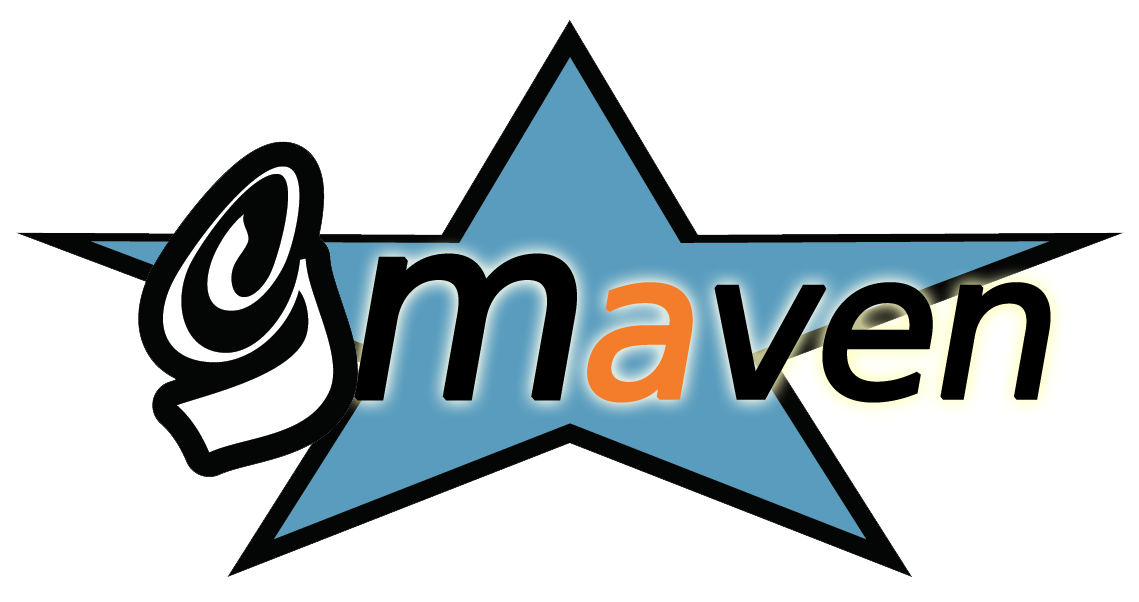
<style>
.page{position:relative;width:1139px;height:602px;background:#ffffff}
.page>*{position:absolute;margin:0}
.t1{font:200px "DejaVuSans";letter-spacing:-0.05em;color:#000000;font-weight:bold;font-style:italic}
.t2{font:250px "DejaVuSans";letter-spacing:-0.05em;color:#000000;font-weight:bold;font-style:italic}
.t3{font:200px "DejaVuSans";letter-spacing:-0.05em;color:#f47d2c;font-weight:bold;font-style:italic}
</style>
<div class="page">
<p class="t1" style="left:354px;top:253px;width:697px;height:150px"><span class="t2">m</span><span class="t3">a</span>ven</p>
</div>
